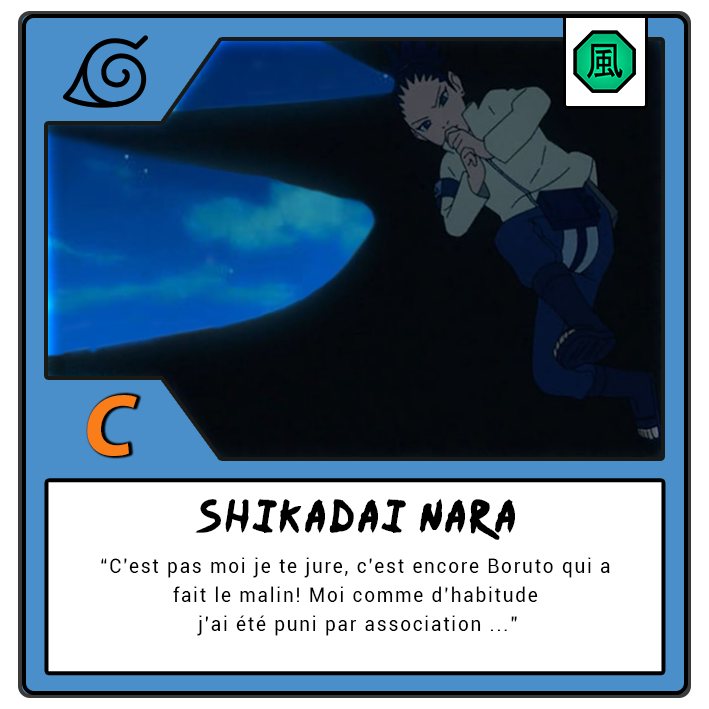
<style>
.page{position:relative;width:709px;height:709px;background:#ffffff}
.page>*{position:absolute;margin:0}
.t1{font:87.5px "MyriadPro-BoldIt";letter-spacing:-0.12em;color:#f97d18}
.t2{font:37.5px "Ninja-Naruto";letter-spacing:0.1em;color:#000000}
.t3{font:20.8px/29.2px "Roboto-Regular";letter-spacing:0.1em;color:#000000;scale:0.9 1}
</style>
<div class="page">
<p class="t1" style="left:87px;top:395px;width:50px;height:61px">C</p>
<p class="t2" style="left:195px;top:498px;width:320px;height:42px">Shikadai Nara</p>
<p class="t3" style="left:101px;top:557px;width:509px;height:79px;text-align:center">“C’est pas moi je te jure, c’est encore Boruto qui a <br>fait le malin! Moi comme d’habitude <br>j’ai été puni par association ...”</p>
</div>
